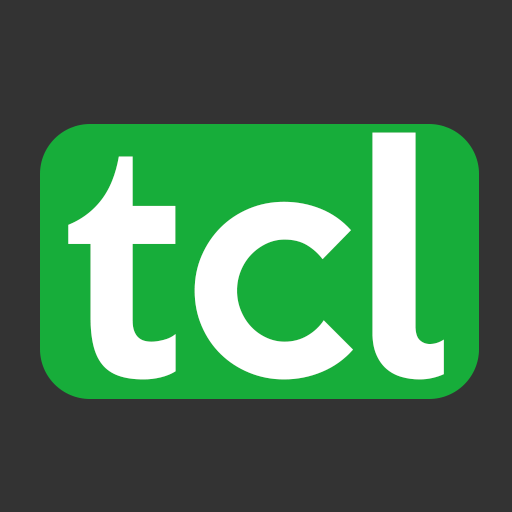
<style>
.page{position:relative;width:512px;height:512px;background:#333333}
.page>*{position:absolute;margin:0}
.t1{font:291.7px "KeepCalm-Medium";color:#ffffff}
</style>
<div class="page">
<p class="t1" style="left:68px;top:132px;width:376px;height:248px">tcl</p>
</div>
